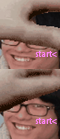
<style>
.page{position:relative;width:60px;height:139px}
.page>*{position:absolute;margin:0}
.t1{font:8px "AdobeHeitiStd-Regular";color:#fe83f4}
</style>
<div class="page">
<p class="t1" style="left:35px;top:51px;width:22px;height:6px">start&lt;</p>
<p class="t1" style="left:35px;top:118px;width:22px;height:6px">start&lt;</p>
</div>
